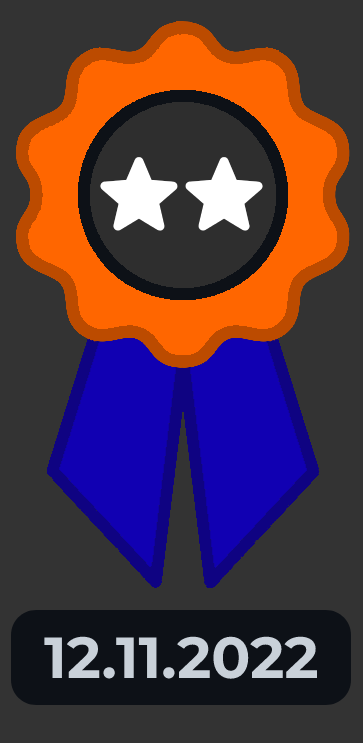
<style>
.page{position:relative;width:363px;height:743px;background:#333333}
.page>*{position:absolute;margin:0}
.t1{font:58px "Montserrat-Bold";color:#c9d1d9}
</style>
<div class="page">
<p class="t1" style="left:44px;top:636px;width:273px;height:43px">12.11.2022</p>
</div>
